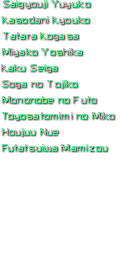
<style>
.page{position:relative;width:128px;height:256px;background:#ffffff}
.page>*{position:absolute;margin:0}
.t1{font:8px/16px "RussellSquare";color:#77dd99;scale:1.16 1}
.t2{font:8px/16px "RussellSquare";letter-spacing:0.04em;color:#77dd99;scale:1.16 1}
.t3{font:8px/16px "RussellSquare";letter-spacing:-0.02em;color:#77dd99;scale:1.16 1}
.t4{font:8px/16px "RussellSquare";letter-spacing:-0.04em;color:#77dd99;scale:1.16 1}
.t5{font:8px/16px "RussellSquare";letter-spacing:-0.14em;color:#77dd99;scale:1.16 1}
.t6{font:8px/16px "RussellSquare";letter-spacing:-0.1em;color:#77dd99;scale:1.16 1}
.t7{font:8px/16px "RussellSquare";letter-spacing:-0.12em;color:#77dd99;scale:1.16 1}
.t8{font:8px/16px "RussellSquare";letter-spacing:0.06em;color:#77dd99;scale:1.16 1}
.t9{font:8px/16px "RussellSquare";letter-spacing:-0.16em;color:#77dd99;scale:1.16 1}
.t10{font:8px/16px "RussellSquare";letter-spacing:0.08em;color:#77dd99;scale:1.16 1}
</style>
<div class="page">
<p class="t1" style="left:1px;top:0px;width:113px;height:151px">Saigyou<span class="t2">j</span>i Yuyuko<br><span class="t3">K</span>asodani <span class="t4">K</span>you<span class="t5">k</span>o<br>Tatara <span class="t4">K</span>ogasa<br>Miya<span class="t6">k</span>o Yoshi<span class="t5">k</span>a<br><span class="t4">K</span>a<span class="t7">k</span>u Seiga<br>Soga no To<span class="t8">ji</span><span class="t6">k</span>o<br>Mononobe no Futo<br><span class="t9">T</span>oyosatomimi no Mi<span class="t9">k</span>o<br>Hou<span class="t10">j</span>uu Nue <br><span class="t9">F</span>utatsuiwa Mamizou</p>
</div>
